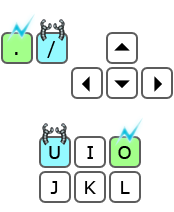
<style>
.page{position:relative;width:174px;height:212px;background:#ffffff}
.page>*{position:absolute;margin:0}
.t1{font:18px "Verdana";color:#000000}
</style>
<div class="page">
<p class="t1" style="left:47px;top:41px;width:8px;height:17px">/</p>
<p class="t1" style="left:15px;top:52px;width:3px;height:3px">.</p>
<p class="t1" style="left:49px;top:146px;width:11px;height:13px">U</p>
<p class="t1" style="left:87px;top:146px;width:6px;height:13px">I</p>
<p class="t1" style="left:118px;top:146px;width:13px;height:13px">O</p>
<p class="t1" style="left:50px;top:181px;width:8px;height:13px">J</p>
<p class="t1" style="left:85px;top:181px;width:11px;height:13px">K</p>
<p class="t1" style="left:121px;top:181px;width:9px;height:13px">L</p>
</div>
